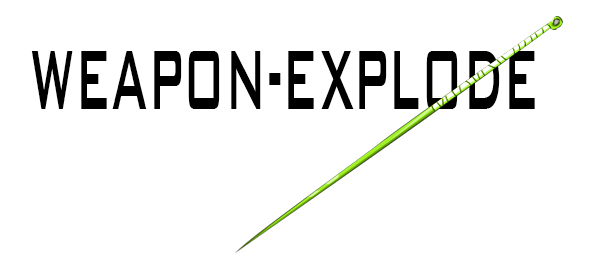
<style>
.page{position:relative;width:600px;height:266px;background:#ffffff}
.page>*{position:absolute;margin:0}
.t1{font:112.6px "BankGothicBT-Medium";color:#000000;scale:0.42 1}
</style>
<div class="page">
<p class="t1" style="left:31px;top:51px;width:504px;height:58px">WEAPON-EXPLODE</p>
</div>
